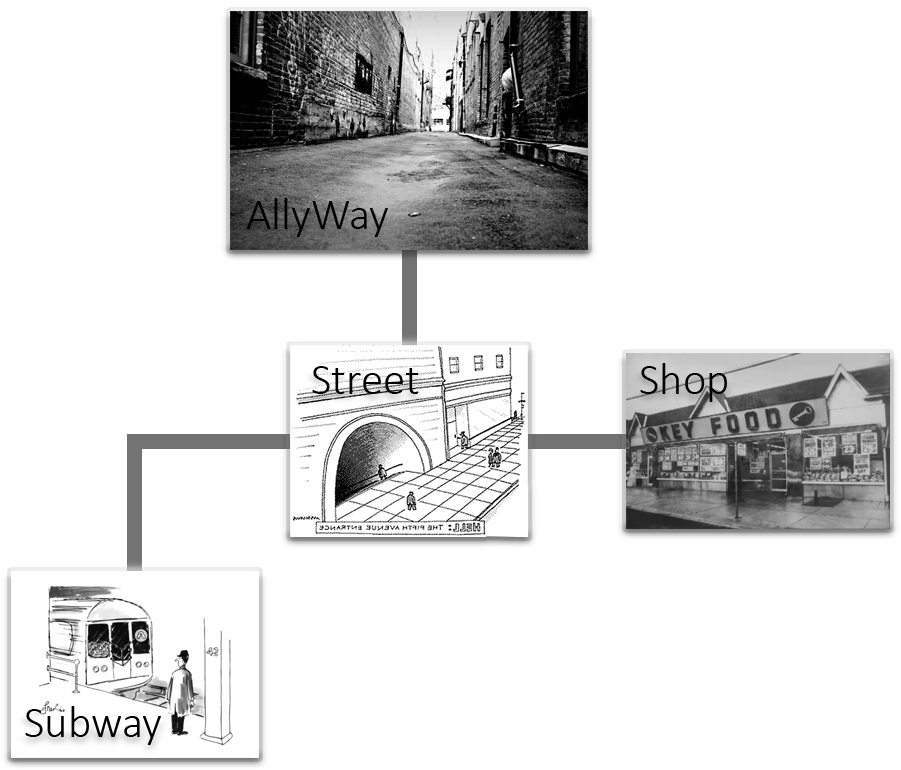
<style>
.page{position:relative;width:901px;height:770px;background:#ffffff}
.page>*{position:absolute;margin:0}
.t1{font:45px "Calibri-Light";color:#000000}
</style>
<div class="page">
<p class="t1" style="left:246px;top:198px;width:142px;height:39px">AllyWay</p>
<p class="t1" style="left:312px;top:366px;width:107px;height:28px">Street</p>
<p class="t1" style="left:640px;top:363px;width:87px;height:39px">Shop</p>
<p class="t1" style="left:25px;top:706px;width:136px;height:39px">Subway</p>
</div>
